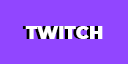
<style>
.page{position:relative;width:128px;height:64px;background:#9146ff}
.page>*{position:absolute;margin:0}
.t1{font:17.7px "Montserrat-Black"}
.t2{font:17.7px "Montserrat-Black";color:#ffffff}
</style>
<div class="page">
<p class="t1" style="left:22px;top:26px;width:78px;height:13px">TWITCH</p>
<p class="t2" style="left:25px;top:26px;width:78px;height:13px">TWITCH</p>
</div>
